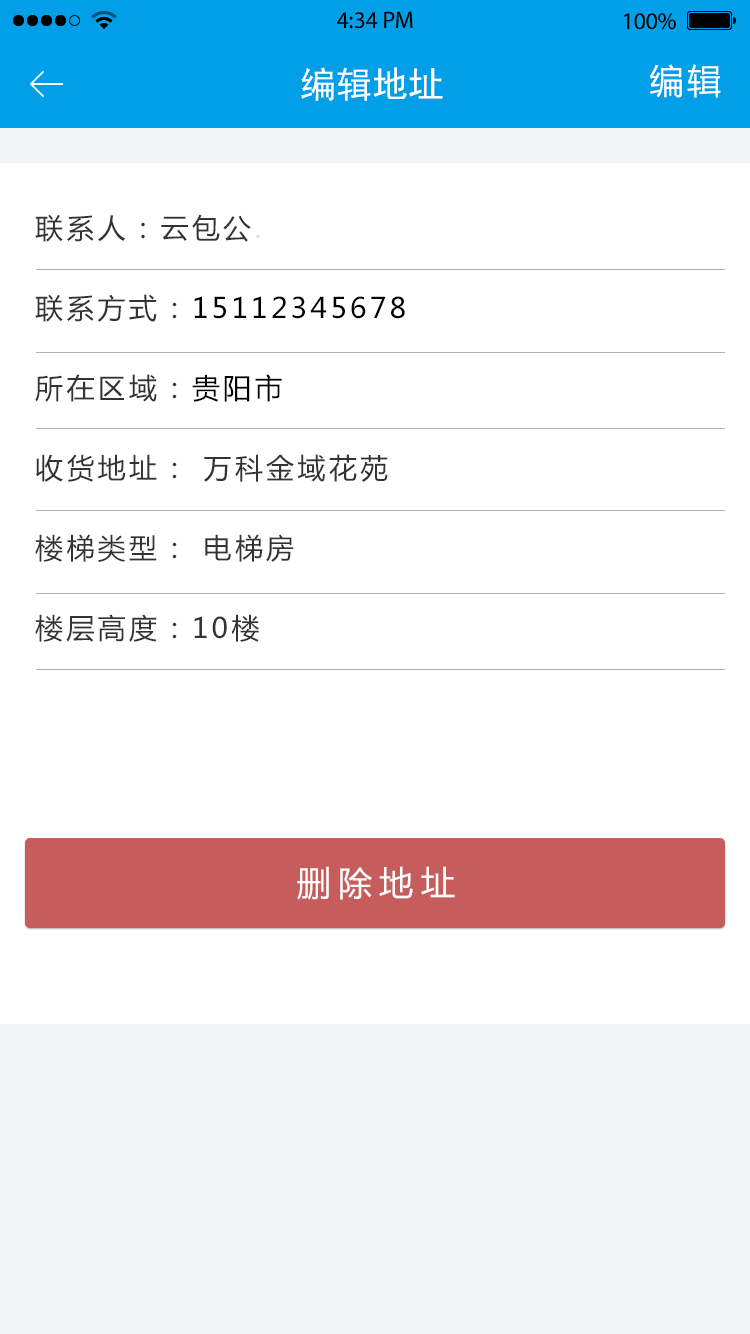
<style>
.page{position:relative;width:750px;height:1334px;background:#ffffff}
.page>*{position:absolute;margin:0}
.t1{font:34px "MicrosoftYaHei";letter-spacing:0.1em;color:#ffffff}
.t2{font:36px "SimHei";color:#ffffff}
.t3{font:28px/80px "MicrosoftYaHei";letter-spacing:0.12em;color:#333333}
.t4{font:28px/80px "MicrosoftYaHei";letter-spacing:0.12em;color:#e1e1e1}
.t5{font:28px/80px "MicrosoftYaHei";letter-spacing:0.12em;color:#000000}
.t6{font:28px/80px "MicrosoftYaHei";letter-spacing:0.12em;color:#ffffff}
.t7{font:28px/50px "MicrosoftYaHei";letter-spacing:0.12em;color:#333333}
.t8{font:34px "MicrosoftYaHei";letter-spacing:0.22em;color:#ffffff}
</style>
<div class="page">
<p class="t1" style="left:650px;top:64px;width:71px;height:34px">编辑</p>
<p class="t2" style="left:301px;top:67px;width:142px;height:34px">编辑地址</p>
<p class="t3" style="left:35px;top:214px;width:446px;height:428px">联系人：云包公<span class="t4">.</span>                 <br>联系方式：<span class="t5">15112345678<br></span>所在区域：<span class="t5">贵阳市<br></span>收货地址： 万科金域花苑<br>楼梯类型： 电梯房        <span class="t6">楼梯房<br></span><span class="t7">楼层高度：10楼</span></p>
<p class="t8" style="left:297px;top:866px;width:158px;height:34px">删除地址</p>
</div>
